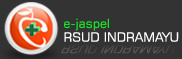
<style>
.page{position:relative;width:182px;height:59px;background:#333333}
.page>*{position:absolute;margin:0}
.t1{font:12.5px "Square721BT-Roman";color:#17e227}
.t2{font:12.5px "Square721BT-Roman";color:#fefefe}
.t3{font:12.5px "Square721BT-Roman";color:#4a4a4a}
</style>
<div class="page">
<p class="t1" style="left:64px;top:18px;width:45px;height:13px">e-jaspel</p>
<p class="t2" style="left:64px;top:32px;width:115px;height:10px">RSUD INDRAMAYU</p>
<p class="t3" style="left:61px;top:44px;width:115px;height:10px">RSUD INDRAMAYU</p>
</div>
